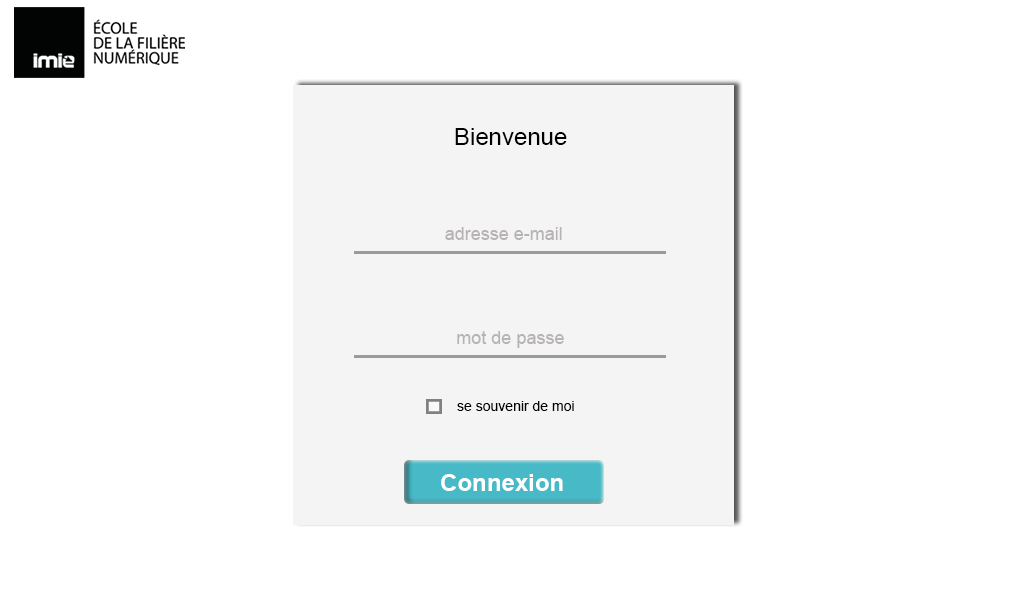
<style>
.page{position:relative;width:1024px;height:600px;background:#ffffff}
.page>*{position:absolute;margin:0}
.t1{font:24px "ArialMT";color:#010101}
.t2{font:18px "ArialMT";color:#b7b3b3}
.t3{font:14px "ArialMT";color:#000000}
.t4{font:24px "Arial-BoldMT";color:#ffffff}
</style>
<div class="page">
<p class="t1" style="left:455px;top:128px;width:112px;height:17px">Bienvenue</p>
<p class="t2" style="left:445px;top:227px;width:117px;height:13px">adresse e-mail</p>
<p class="t2" style="left:457px;top:331px;width:107px;height:17px">mot de passe</p>
<p class="t3" style="left:457px;top:401px;width:117px;height:10px">se souvenir de moi</p>
<p class="t4" style="left:441px;top:474px;width:122px;height:17px">Connexion</p>
</div>
